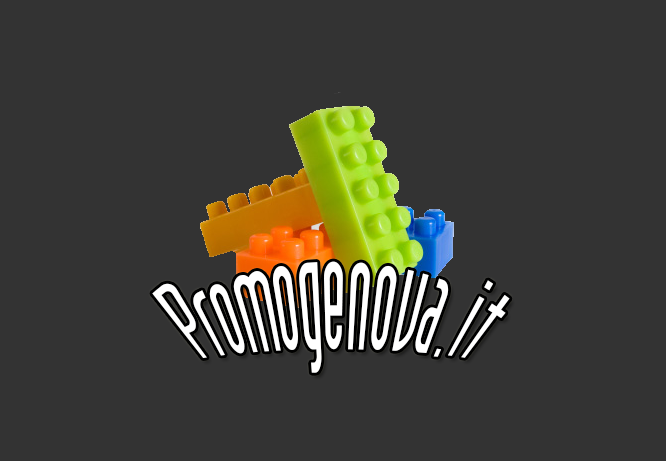
<style>
.page{position:relative;width:666px;height:461px;background:#333333}
.page>*{position:absolute;margin:0}
.t1{font:72px "Institution";color:#ffffff;scale:1.05 1}
</style>
<div class="page">
<p class="t1" style="left:152px;top:261px;width:358px;height:112px">Promogenova.it</p>
</div>
